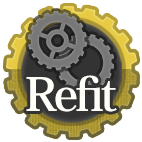
<style>
.page{position:relative;width:142px;height:142px;background:#ffffff}
.page>*{position:absolute;margin:0}
.t1{font:48px "HeiseiMinStd-W7";letter-spacing:-0.04em;color:#fffef9}
</style>
<div class="page">
<p class="t1" style="left:26px;top:75px;width:91px;height:37px">Refit</p>
</div>
